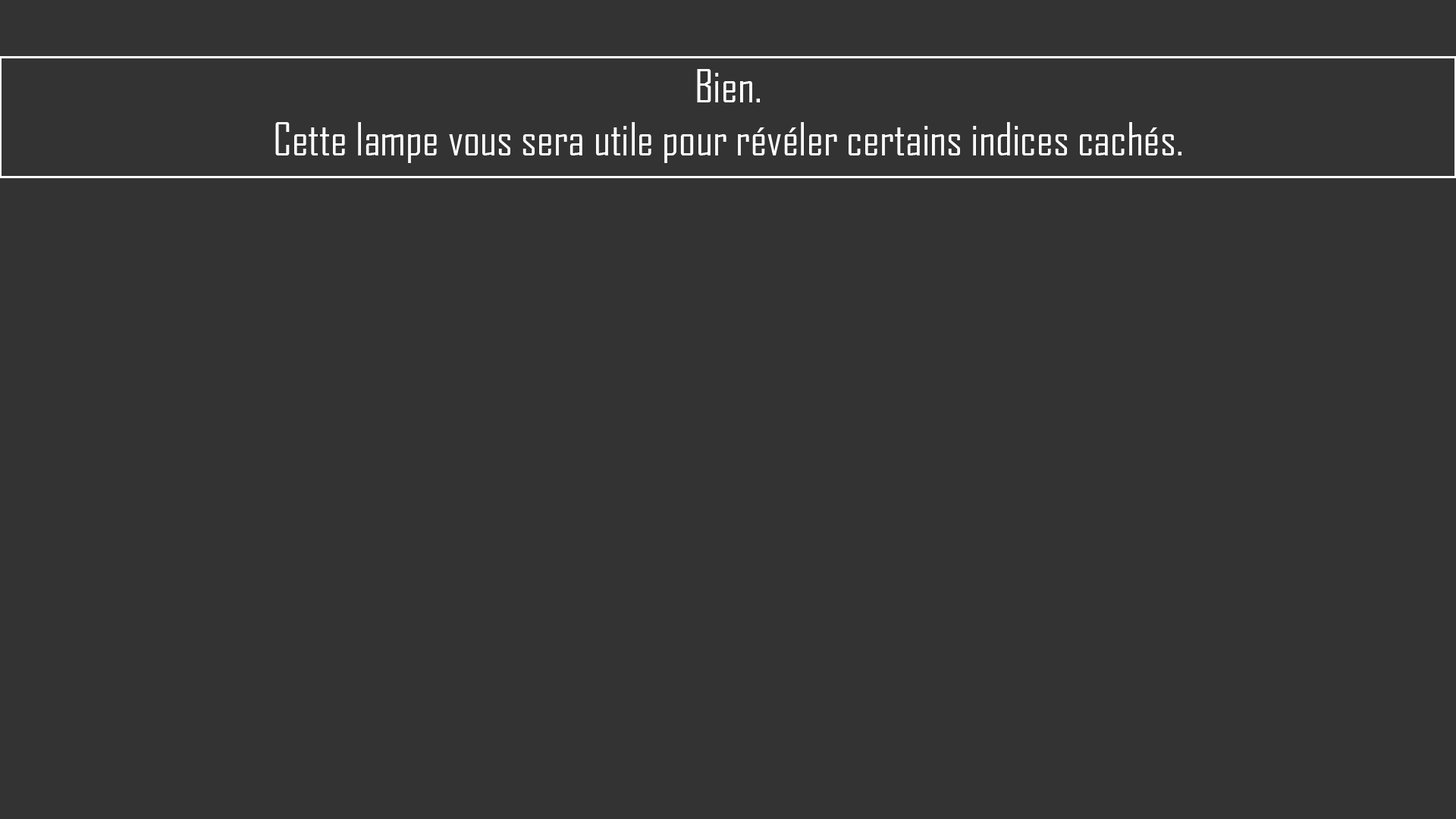
<style>
.page{position:relative;width:1456px;height:819px;background:#333333}
.page>*{position:absolute;margin:0}
.t1{font:44.2px "AgencyFB-Reg";color:#ffffff}
</style>
<div class="page">
<p class="t1" style="left:275px;top:69px;width:906px;height:94px;text-align:center">Bien.<br>Cette lampe vous sera utile pour révéler certains indices cachés.</p>
</div>
